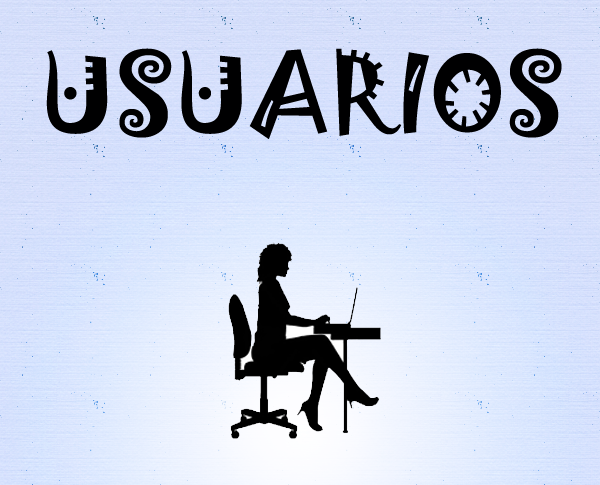
<style>
.page{position:relative;width:600px;height:485px}
.page>*{position:absolute;margin:0}
.t1{font:100px "Jokerman-Regular";color:#000001}
</style>
<div class="page">
<p class="t1" style="left:46px;top:48px;width:516px;height:91px">USUARIOS</p>
</div>
